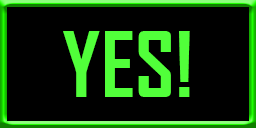
<style>
.page{position:relative;width:256px;height:128px;background:#000000}
.page>*{position:absolute;margin:0}
.t1{font:87px "AgencyFB-Bold";color:#51ff3a}
</style>
<div class="page">
<p class="t1" style="left:63px;top:31px;width:127px;height:66px">YES!</p>
</div>
